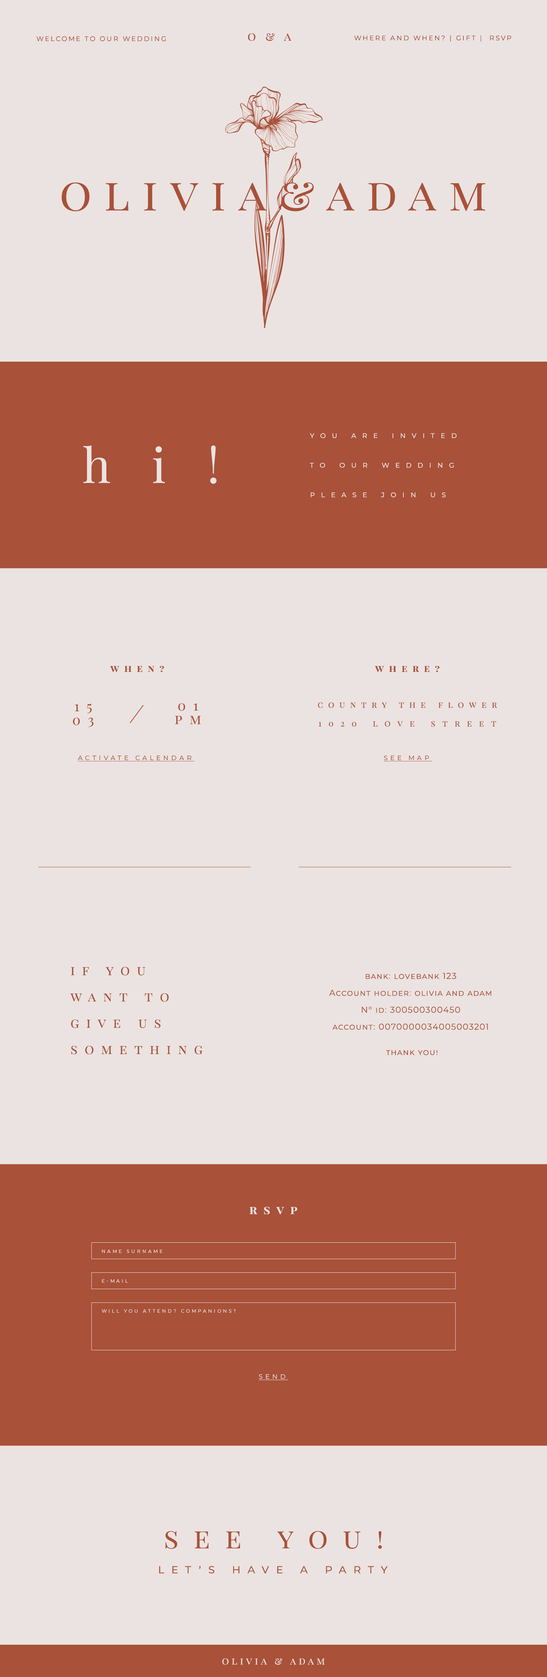
<style>
.page{position:relative;width:547px;height:1677px;background:#ebe3e1}
.page>*{position:absolute;margin:0}
.t1{font:6.7px "Montserrat-Regular";letter-spacing:0.2em;color:#a7513c;text-transform:uppercase}
.t2{font:11.8px "PlayfairDisplay-Regular";letter-spacing:0.28em;color:#a7513d;font-variant:small-caps}
.t3{font:6.7px "Montserrat-Regular";letter-spacing:0.2em;color:#a7513c}
.t4{font:45.1px "PlayfairDisplay-Regular";letter-spacing:0.28em;color:#a95139;font-variant:small-caps}
.t5{font:8.2px "Montserrat-Regular";letter-spacing:0.72em;color:#ebe3e1;font-variant:small-caps}
.t6{font:48px "PlayfairDisplay-Regular";letter-spacing:0.86em;color:#ebe3e1}
.t7{font:9.5px "PlayfairDisplay-Bold";letter-spacing:0.54em;color:#a95139;font-variant:small-caps}
.t8{font:13.6px/13.6px "PlayfairDisplay-Regular";letter-spacing:0.54em;color:#a95139;font-variant:small-caps}
.t9{font:8.5px "PlayfairDisplay-Regular";letter-spacing:0.61em;color:#a95139;font-variant:small-caps}
.t10{font:8.5px "PlayfairDisplay-Regular";letter-spacing:0.827em;color:#a95139;font-variant:small-caps}
.t11{font:6.5px "Montserrat-Regular";letter-spacing:0.4em;color:#a95139;text-transform:uppercase;text-decoration:underline}
.t12{font:13.2px/13.1px "PlayfairDisplay-Regular";letter-spacing:0.54em;color:#a95139;font-variant:small-caps}
.t13{font:8.5px/8.5px "Montserrat-Regular";letter-spacing:0.07em;color:#a95139;font-variant:small-caps}
.t14{font:11.7px "PlayfairDisplay-Bold";letter-spacing:0.54em;color:#ebe3e1;font-variant:small-caps}
.t15{font:4.6px "Montserrat-Regular";letter-spacing:0.4em;color:#ebe3e1;text-transform:uppercase}
.t16{font:6.5px "Montserrat-Regular";letter-spacing:0.4em;color:#ebe3e1;text-transform:uppercase;text-decoration:underline}
.t17{font:27.8px "PlayfairDisplay-Regular";letter-spacing:0.54em;color:#a95139;font-variant:small-caps}
.t18{font:12.7px "Montserrat-Regular";letter-spacing:0.54em;color:#a95139;font-variant:small-caps}
.t19{font:9.8px "PlayfairDisplay-Regular";letter-spacing:0.28em;color:#e9e3e0;font-variant:small-caps}
</style>
<div class="page">
<p class="t1" style="left:36px;top:36px;width:130px;height:5px">welcome to our wedding</p>
<p class="t2" style="left:248px;top:33px;width:44px;height:8px">o &amp; a</p>
<p class="t3" style="left:354px;top:35px;width:158px;height:7px">WHERE AND WHEN? | GIFT |  RSVP</p>
<p class="t4" style="left:62px;top:182px;width:424px;height:29px">olivia&amp;adam</p>
<p class="t5" style="left:310px;top:433px;width:147px;height:64px">you are invited<br><br><br>to our wedding<br><br><br>please join us</p>
<p class="t6" style="left:83px;top:445px;width:134px;height:39px">hi!</p>
<p class="t7" style="left:110px;top:666px;width:54px;height:6px">when?</p>
<p class="t7" style="left:375px;top:666px;width:65px;height:6px">where?</p>
<p class="t8" style="left:73px;top:703px;width:21px;height:24px;text-align:center">15<br>03</p>
<p class="t8" style="left:175px;top:703px;width:26px;height:21px;text-align:center">01<br>pm</p>
<p class="t9" style="left:318px;top:702px;width:180px;height:6px">country the flower</p>
<p class="t10" style="left:319px;top:721px;width:178px;height:6px">1020 love street</p>
<p class="t11" style="left:78px;top:755px;width:117px;height:6px">activate calendar</p>
<p class="t11" style="left:384px;top:755px;width:49px;height:6px">see map</p>
<p class="t12" style="left:70px;top:966px;width:133px;height:88px">if you<br><br>want to<br><br>give us <br><br>something</p>
<p class="t13" style="left:329px;top:972px;width:163px;height:83px;text-align:center">bank: lovebank 123<br><br>Account holder: olivia and adam<br><br>N° id: 300500300450<br><br>account: 0070000034005003201<br><br><br> thank you!</p>
<p class="t14" style="left:250px;top:1206px;width:48px;height:8px">rsvp</p>
<p class="t15" style="left:102px;top:1249px;width:61px;height:4px">name surname</p>
<p class="t15" style="left:102px;top:1279px;width:26px;height:3px">e-mail</p>
<p class="t15" style="left:102px;top:1309px;width:134px;height:3px">Will you attend? companions?</p>
<p class="t16" style="left:259px;top:1374px;width:30px;height:6px">send</p>
<p class="t17" style="left:165px;top:1531px;width:217px;height:17px">see you!</p>
<p class="t18" style="left:159px;top:1566px;width:229px;height:7px">let’s have a party</p>
<p class="t19" style="left:222px;top:1658px;width:103px;height:6px">olivia &amp; adam</p>
</div>
